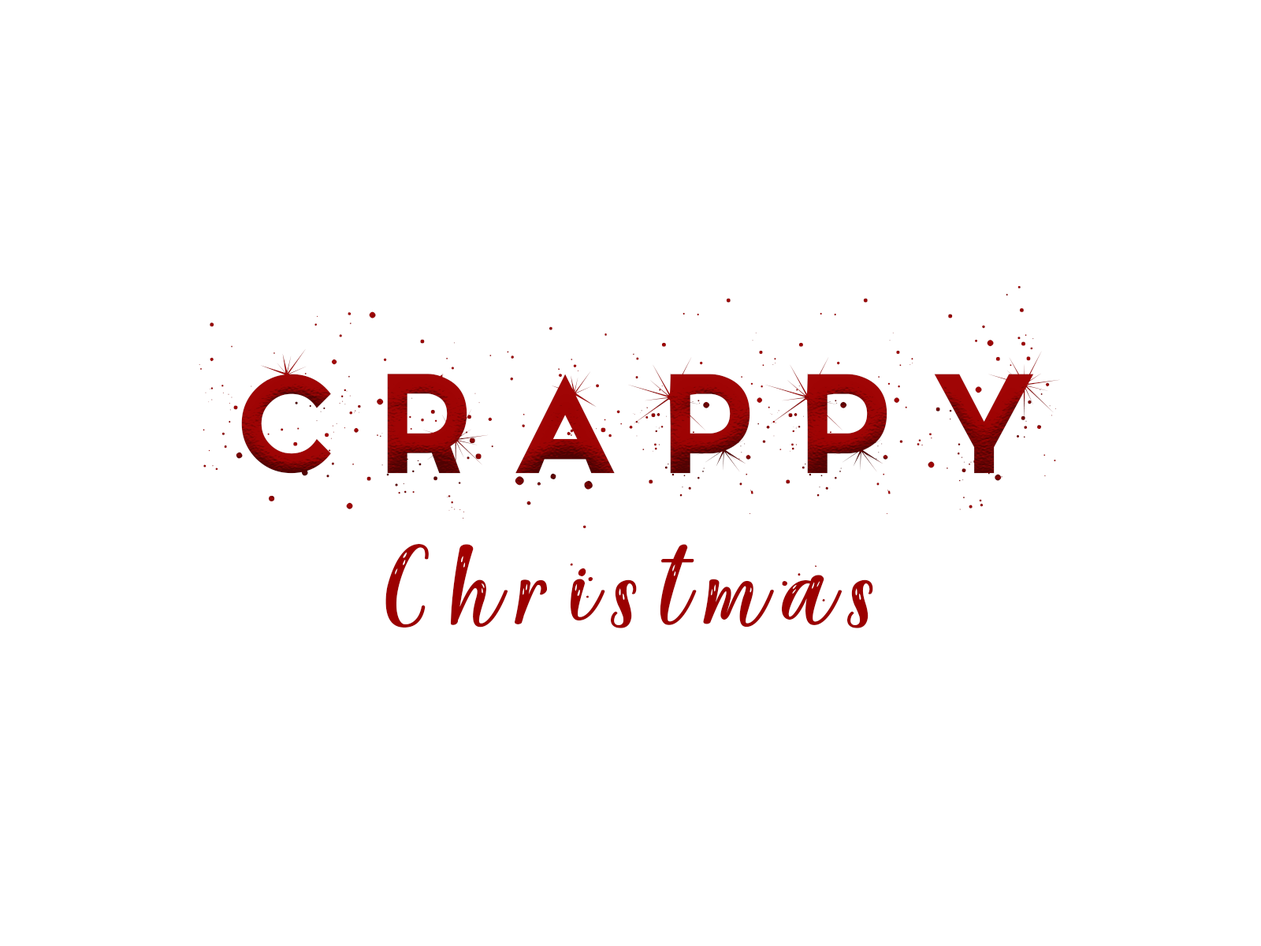
<style>
.page{position:relative;width:1261px;height:946px;background:#ffffff}
.page>*{position:absolute;margin:0}
.t1{font:189.1px "Snowinter-Free";letter-spacing:0.263em;color:#9b0000}
.t2{font:173.4px "Reindeer-Christmas---Personal-Use";letter-spacing:0.1em;color:#9b0000}
</style>
<div class="page">
<p class="t1" style="left:199px;top:285px;width:861px;height:243px">Crappy</p>
<p class="t2" style="left:385px;top:544px;width:488px;height:84px">Christmas</p>
</div>
